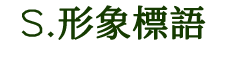
<style>
.page{position:relative;width:227px;height:57px;background:#ffffff}
.page>*{position:absolute;margin:0}
.t1{font:36px "SourceHanSerifTW-Regular";letter-spacing:0.01em;color:#153b01;font-weight:bold}
.t2{font:36px "AMGDT_IV50";letter-spacing:0.01em;color:#153b01}
</style>
<div class="page">
<p class="t1" style="left:21px;top:5px;width:185px;height:35px"><span class="t2">S.</span>形象標語</p>
</div>
